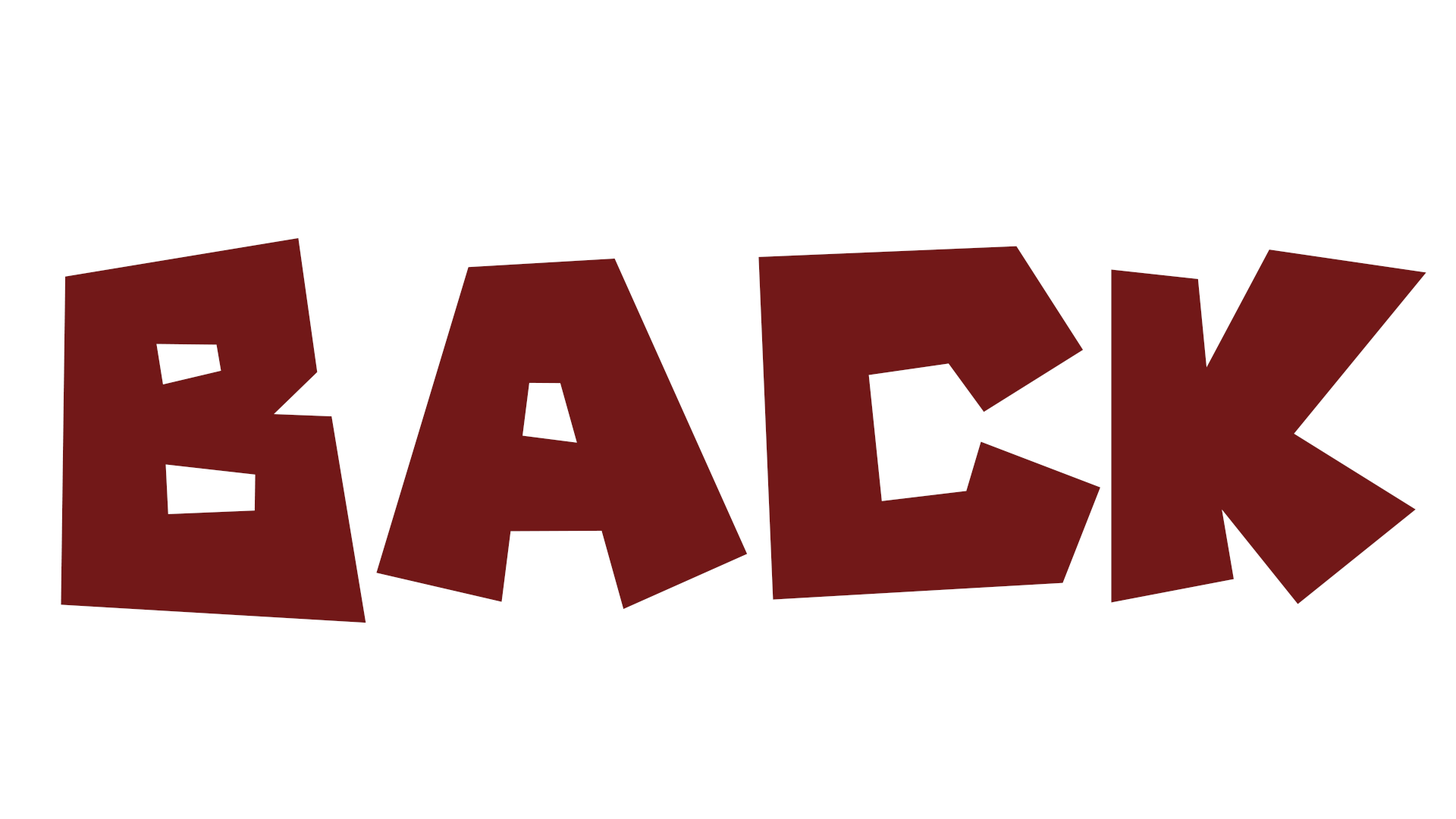
<style>
.page{position:relative;width:1456px;height:819px;background:#ffffff}
.page>*{position:absolute;margin:0}
.t1{font:460px "Monsterz";color:#721818}
</style>
<div class="page">
<p class="t1" style="left:61px;top:238px;width:1365px;height:385px">back</p>
</div>
